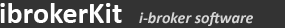
<style>
.page{position:relative;width:285px;height:28px;background:#333333}
.page>*{position:absolute;margin:0}
.t1{font:30px "Calibri-Bold";color:#fefefe}
.t2{font:16px "Calibri-BoldItalic";color:#d6d6d6}
</style>
<div class="page">
<p class="t1" style="left:0px;top:3px;width:122px;height:20px">ibrokerKit</p>
<p class="t2" style="left:139px;top:12px;width:114px;height:14px">i-broker software</p>
</div>
